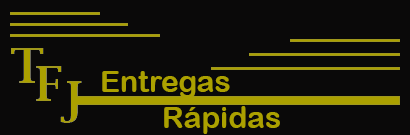
<style>
.page{position:relative;width:410px;height:135px;background:#0a0909}
.page>*{position:absolute;margin:0}
.t1{font:30px "ArialRoundedMTBold";color:#aba000}
</style>
<div class="page">
<p class="t1" style="left:102px;top:71px;width:128px;height:27px">Entregas</p>
<p class="t1" style="left:164px;top:106px;width:116px;height:28px">Rápidas</p>
</div>
